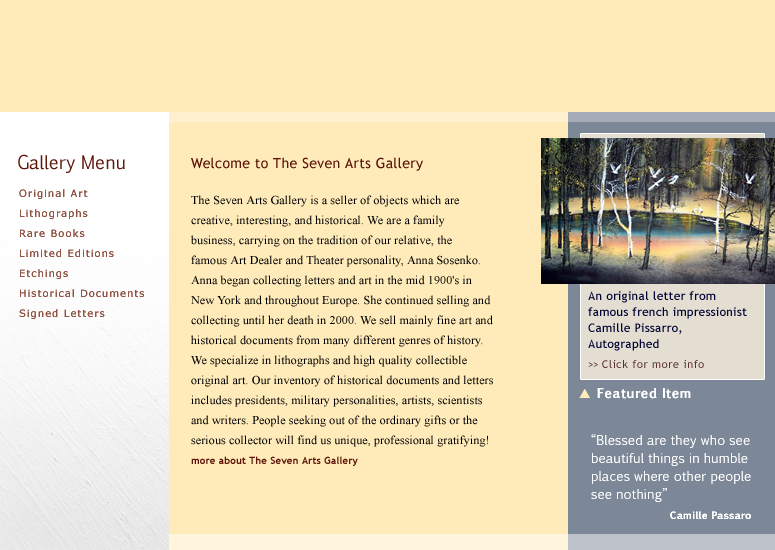
<style>
.page{position:relative;width:775px;height:550px;background:#ffebba}
.page>*{position:absolute;margin:0}
.t1{font:18px "EuphemiaUCAS";letter-spacing:0.01em;color:#5d1609}
.t2{font:14px "TrebuchetMS";letter-spacing:0.025em;color:#5d1609}
.t3{font:10px/20px "Verdana";letter-spacing:0.1em;color:#915546}
.t4{font:10px/24px "Verdana";letter-spacing:0.1em;color:#915546}
.t5{font:12px/20px "TimesNewRomanPSMT";letter-spacing:0.01em;color:#000000}
.t6{font:10px/20px "TrebuchetMS-Bold";letter-spacing:0.01em;color:#5d1609}
.t7{font:12px/16px "TrebuchetMS";letter-spacing:0.025em;color:#000333}
.t8{font:11px/20px "TrebuchetMS";letter-spacing:-0.075em;color:#5a302a}
.t9{font:11px/20px "TrebuchetMS";letter-spacing:0.05em;color:#5a302a}
.t10{font:13px "EuphemiaUCAS-Bold";letter-spacing:0.025em;color:#ffffff}
.t11{font:13px "ZapfDingbatsITC";letter-spacing:0.1em;color:#ffebba}
.t12{font:13px/18px "EuphemiaUCAS";letter-spacing:0.01em;color:#ffffff}
.t13{font:10px/20px "EuphemiaUCAS-Bold";letter-spacing:0.01em;color:#ffffff}
</style>
<div class="page">
<p class="t1" style="left:18px;top:154px;width:107px;height:19px">Gallery Menu</p>
<p class="t2" style="left:191px;top:157px;width:232px;height:14px">Welcome to The Seven Arts Gallery</p>
<p class="t3" style="left:19px;top:189px;width:125px;height:130px"><span class="t4">Original Art<br></span>Lithographs<br>Rare Books<br>Limited Editions<br>Etchings<br>Historical Documents<br>Signed Letters</p>
<p class="t5" style="left:191px;top:195px;width:302px;height:271px">The Seven Arts Gallery is a seller of objects which are <br>creative, interesting, and historical. We are a family <br>business, carrying on the tradition of our relative, the <br>famous Art Dealer and Theater personality, Anna Sosenko. <br>Anna began collecting letters and art in the mid 1900's in <br>New York and throughout Europe. She continued selling and <br>collecting until her death in 2000. We sell mainly fine art and <br>historical documents from many different genres of history. <br>We specialize in lithographs and high quality collectible <br>original art. Our inventory of historical documents and letters <br>includes presidents, military personalities, artists, scientists <br>and writers. People seeking out of the ordinary gifts or the <br>serious collector will find us unique, professional gratifying!   <br><span class="t6">more about The Seven Arts Gallery</span></p>
<p class="t7" style="left:588px;top:291px;width:159px;height:77px">An original letter from<br>famous french impressionist<br>Camille Pissarro, <br>Autographed<br><span class="t8">&gt;&gt;</span><span class="t9"> Click for more info</span></p>
<p class="t10" style="left:579px;top:388px;width:112px;height:11px"><span class="t11">s </span>Featured Item</p>
<p class="t12" style="left:591px;top:434px;width:160px;height:85px">“Blessed are they who see <br>beautiful things in humble <br>places where other people <br>see nothing”<br>        <span class="t13">    Camille Passaro</span></p>
</div>
